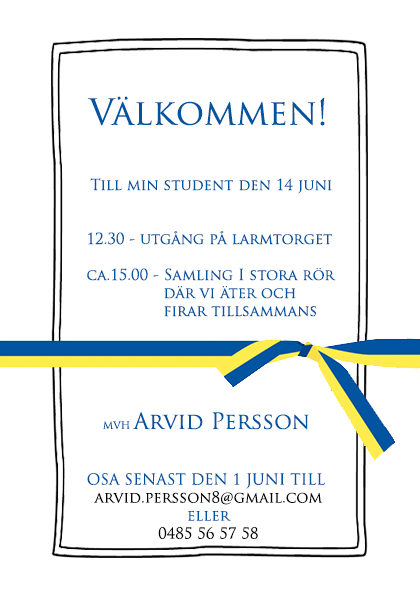
<style>
.page{position:relative;width:420px;height:595px;background:#ffffff}
.page>*{position:absolute;margin:0}
.t1{font:35px "TrajanPro-Regular";color:#0054a0}
.t2{font:15px "TrajanPro-Regular";color:#0054a0}
.t3{font:22px "TrajanPro-Regular";color:#0054a0}
.t4{font:10px "TrajanPro-Regular";color:#0054a0}
.t5{font:15px "TrajanPro-Regular";color:#000000}
</style>
<div class="page">
<p class="t1" style="left:87px;top:96px;width:238px;height:30px">Välkommen!</p>
<p class="t2" style="left:87px;top:178px;width:249px;height:139px;text-align:center">Till min student den 14 juni<br><br><br>12.30 - utgång på larmtorget<br><br>ca.15.00 - Samling I stora rör     där vi äter och      firar tillsammans</p>
<p class="t3" style="left:103px;top:412px;width:206px;height:18px"><span class="t4">MVH </span>Arvid Persson</p>
<p class="t2" style="left:87px;top:473px;width:238px;height:66px;text-align:center">OSA SENAST DEN 1 JUNI TILL <br><span class="t5">arvid.persson8@gmail.com<br></span>eller<br><span class="t5">0485 56 57 58</span></p>
</div>
